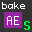
<style>
.page{position:relative;width:32px;height:32px;background:#333333}
.page>*{position:absolute;margin:0}
.t1{font:9px "Monaco";letter-spacing:0.06em;color:#ffffff}
.t2{font:11.9px "Monaco";letter-spacing:0.06em;color:#ffffff}
.t3{font:12.2px "Monaco";letter-spacing:0.06em;color:#00ff30;font-weight:bold}
</style>
<div class="page">
<p class="t1" style="left:2px;top:2px;width:23px;height:7px">bake</p>
<p class="t2" style="left:7px;top:16px;width:12px;height:9px">AE</p>
<p class="t3" style="left:24px;top:21px;width:6px;height:9px">S</p>
</div>
